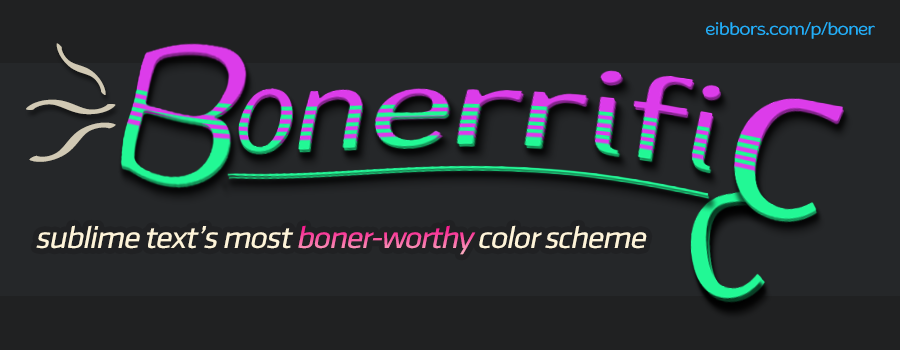
<style>
.page{position:relative;width:900px;height:350px;background:#252729}
.page>*{position:absolute;margin:0}
.t1{font:18px "Merge-Light";letter-spacing:-0.05em;color:#22aff8;scale:1.1 1}
.t2{font:67.7px "EideticModern";letter-spacing:-0.05em;color:#d1c9b4;font-style:italic;scale:2.34 1}
.t3{font:75px "EideticModern";letter-spacing:-0.05em;color:#d1c9b4;font-style:italic;scale:2.7 1}
.t4{font:88.7px "EideticModern";letter-spacing:-0.05em;color:#d1c9b4;font-style:italic;scale:2.34 1}
.t5{font:32px "KlavikaRegular-OSF";letter-spacing:-0.05em;color:#fef4d9;font-style:italic;scale:1.1 1}
.t6{font:32px "KlavikaRegular-OSF";letter-spacing:-0.05em;color:#f50085;font-style:italic;scale:1.1 1}
</style>
<div class="page">
<p class="t1" style="left:706px;top:22px;width:169px;height:17px">eibbors.com/p/boner</p>
<p class="t2" style="left:56px;top:43px;width:50px;height:52px;rotate:-140deg">~</p>
<p class="t3" style="left:26px;top:99px;width:90px;height:16px;rotate:3deg">~</p>
<p class="t4" style="left:29px;top:122px;width:87px;height:40px;rotate:152deg">~</p>
<p class="t5" style="left:36px;top:225px;width:611px;height:30px">sublime text’s most <span class="t6">boner-worthy </span>color scheme</p>
</div>
